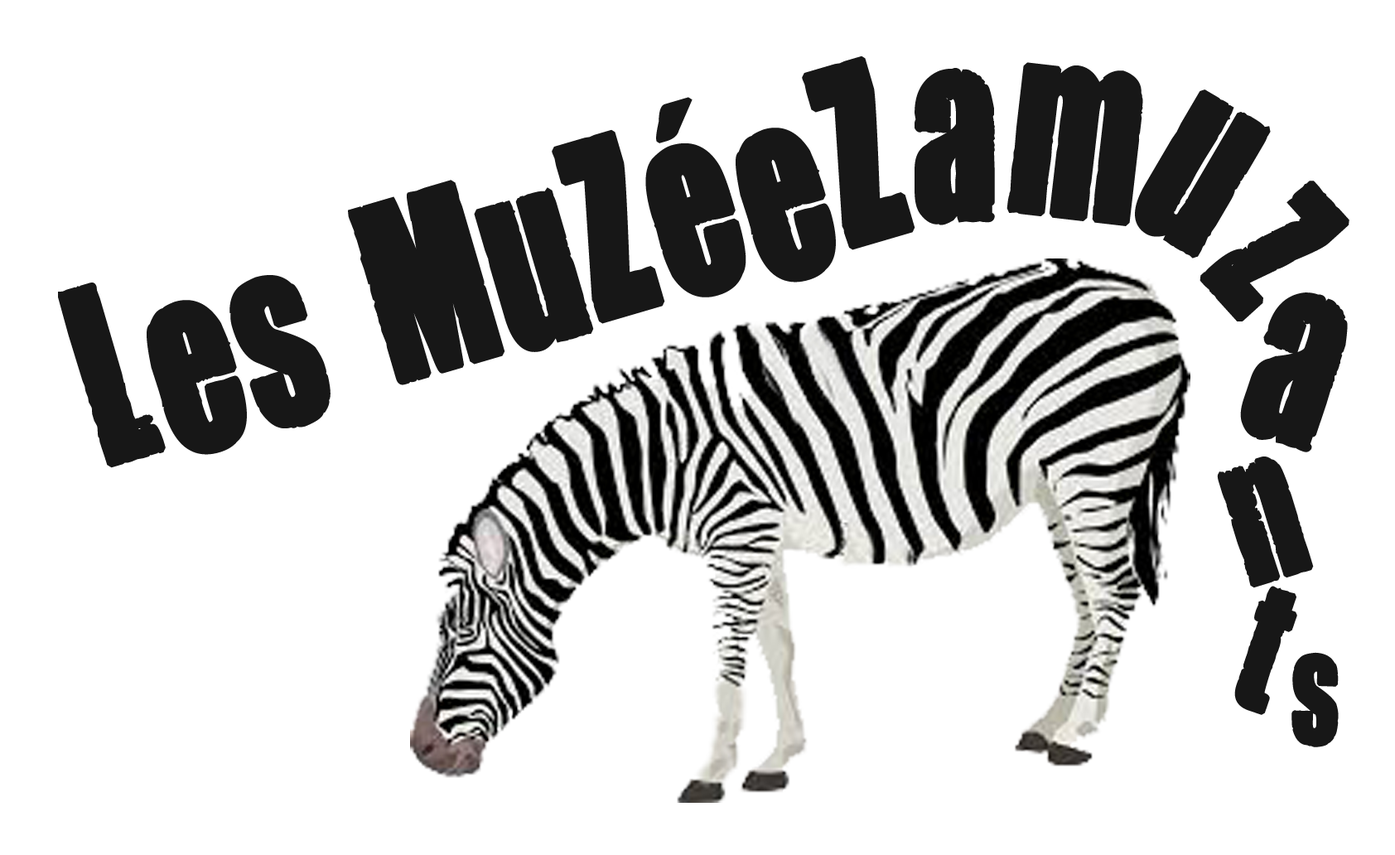
<style>
.page{position:relative;width:1395px;height:855px;background:#ffffff}
.page>*{position:absolute;margin:0}
.t1{font:207.1px "YouAreLoved";color:#171717;font-weight:bold;scale:0.9 1}
.t2{font:186.4px "YouAreLoved";color:#171717;font-weight:bold;scale:1.11 1}
.t3{font:165.7px "YouAreLoved";color:#171717;font-weight:bold;scale:0.9 1}
.t4{font:151.9px "YouAreLoved";color:#171717;font-weight:bold;scale:0.9 1}
.t5{font:124.3px "YouAreLoved";color:#171717;font-weight:bold;scale:0.9 1}
</style>
<div class="page">
<p class="t1" style="left:58px;top:55px;width:857px;height:413px;rotate:-16deg">Les MuZéeZ</p>
<p class="t1" style="left:1006px;top:62px;width:137px;height:164px;rotate:7deg">m</p>
<p class="t2" style="left:914px;top:68px;width:81px;height:157px">a</p>
<p class="t1" style="left:1135px;top:89px;width:136px;height:169px;rotate:30deg">u</p>
<p class="t1" style="left:1199px;top:181px;width:150px;height:140px;rotate:48deg">z</p>
<p class="t1" style="left:1240px;top:292px;width:108px;height:160px;rotate:19deg">a</p>
<p class="t3" style="left:1217px;top:456px;width:97px;height:132px;rotate:-17deg">n</p>
<p class="t4" style="left:1234px;top:586px;width:63px;height:129px;rotate:19deg">t</p>
<p class="t5" style="left:1291px;top:652px;width:48px;height:95px;rotate:2deg">s</p>
</div>
